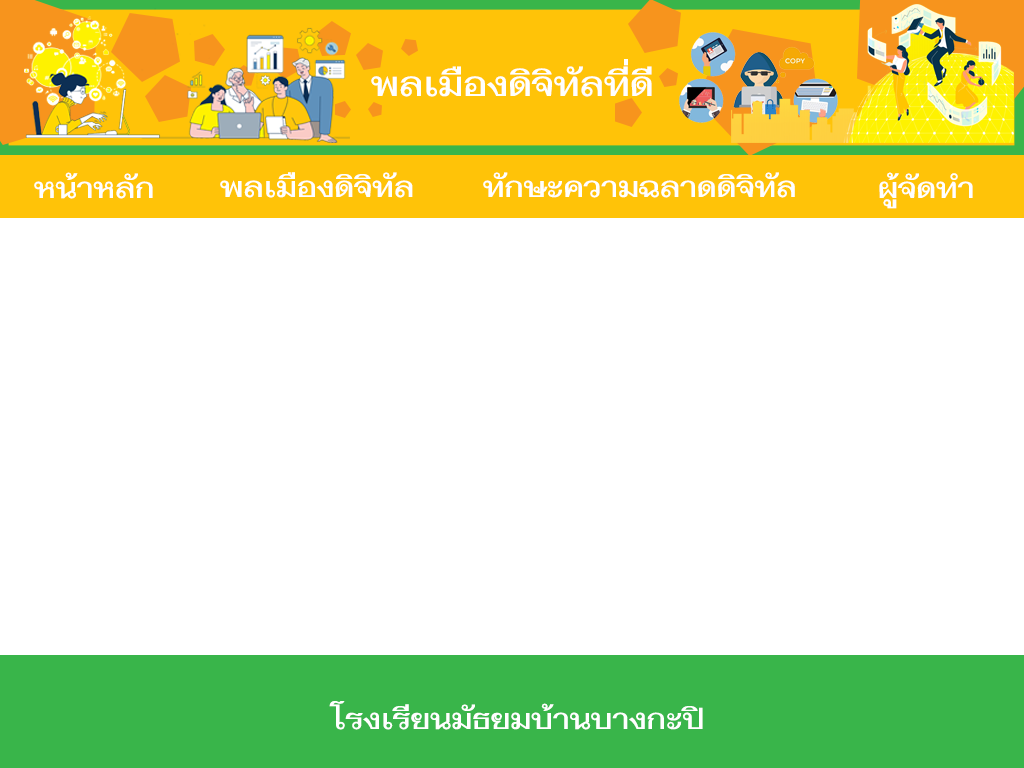
<style>
.page{position:relative;width:1024px;height:768px;background:#ffffff}
.page>*{position:absolute;margin:0}
.t1{font:48px "THFahkwang-Bold";color:#ffffff}
.t2{font:40px "THFahkwang-Bold";color:#ffffff}
</style>
<div class="page">
<p class="t1" style="left:371px;top:59px;width:281px;height:38px">พลเมืองดิจิทัลที่ดี</p>
<p class="t2" style="left:34px;top:172px;width:119px;height:27px">หน้าหลัก</p>
<p class="t2" style="left:220px;top:172px;width:193px;height:26px">พลเมืองดิจิทัล</p>
<p class="t2" style="left:483px;top:172px;width:312px;height:26px">ทักษะความฉลาดดิจิทัล</p>
<p class="t2" style="left:879px;top:172px;width:94px;height:37px">ผู้จัดทำ</p>
<p class="t2" style="left:329px;top:701px;width:374px;height:29px">โรงเรียนมัธยมบ้านบางกะปิ</p>
</div>
